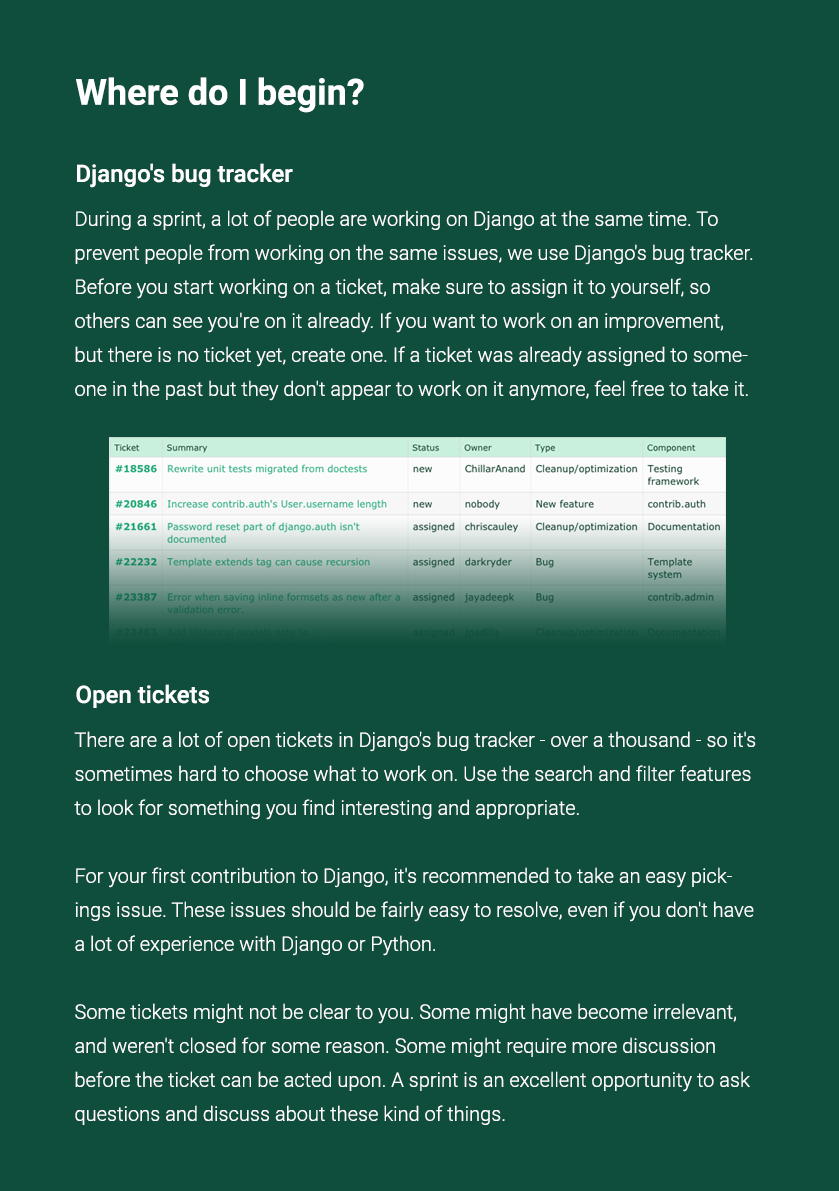
<style>
.page{position:relative;width:839px;height:1191px;background:#0f4e3c}
.page>*{position:absolute;margin:0}
.t1{font:36px "Roboto-Bold";color:#ffffff}
.t2{font:24px "Roboto-Medium";color:#ffffff}
.t3{font:20px/34px "Roboto-Light";color:#ffffff}
</style>
<div class="page">
<p class="t1" style="left:76px;top:77px;width:288px;height:36px">Where do I begin?</p>
<p class="t2" style="left:77px;top:163px;width:216px;height:25px">Django's bug tracker</p>
<p class="t3" style="left:75px;top:210px;width:678px;height:191px">During a sprint, a lot of people are working on Django at the same time. To prevent people from working on the same issues, we use Django's bug tracker. Before you start working on a ticket, make sure to assign it to yourself, so others can see you're on it already. If you want to work on an improvement, but there is no ticket yet, create one. If a ticket was already assigned to someone in the past but they don't appear to work on it anymore, feel free to take it.</p>
<p class="t2" style="left:76px;top:684px;width:133px;height:24px">Open tickets</p>
<p class="t3" style="left:74px;top:731px;width:682px;height:394px">There are a lot of open tickets in Django's bug tracker - over a thousand - so it's sometimes hard to choose what to work on. Use the search and filter features to look for something you find interesting and appropriate.<br><br>For your first contribution to Django, it's recommended to take an easy pickings issue. These issues should be fairly easy to resolve, even if you don't have a lot of experience with Django or Python.<br><br>Some tickets might not be clear to you. Some might have become irrelevant, and weren't closed for some reason. Some might require more discussion before the ticket can be acted upon. A sprint is an excellent opportunity to ask questions and discuss about these kind of things.</p>
</div>
